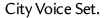
<style>
.page{position:relative;width:106px;height:18px;background:#ffffff}
.page>*{position:absolute;margin:0}
.t1{font:16px "Amira-Roman";letter-spacing:-0.01em;color:#000000}
</style>
<div class="page">
<p class="t1" style="left:5px;top:2px;width:94px;height:16px;opacity:0.96">City Voice Set.</p>
</div>
